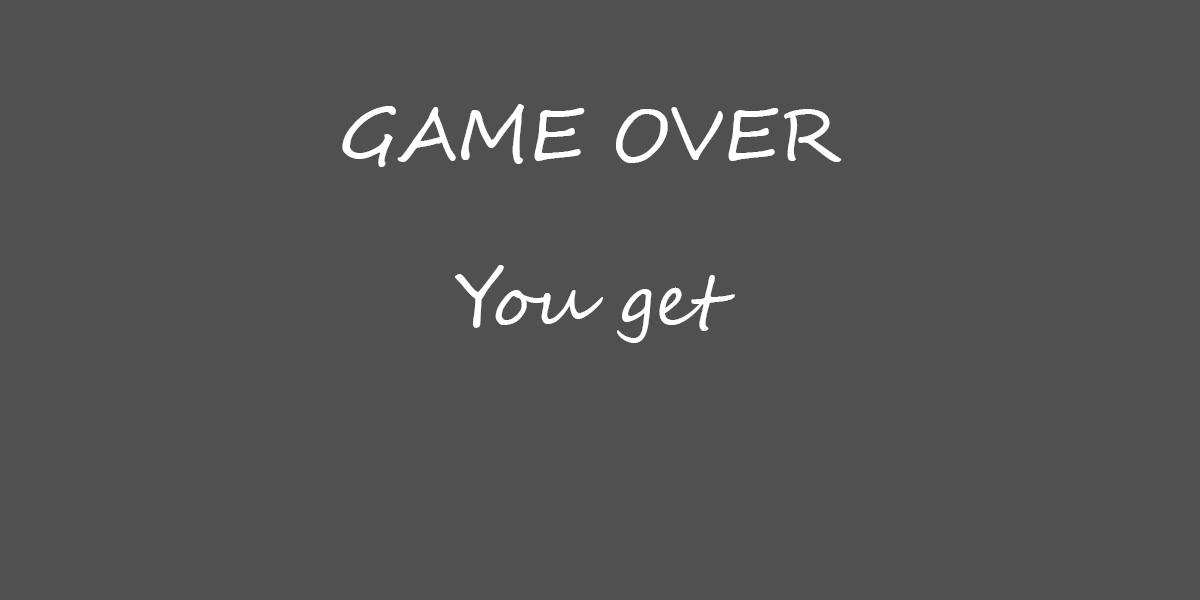
<style>
.page{position:relative;width:1200px;height:600px;background:#505050}
.page>*{position:absolute;margin:0}
.t1{font:72px "SegoeScript";color:#ffffff}
</style>
<div class="page">
<p class="t1" style="left:342px;top:104px;width:500px;height:63px">GAME OVER</p>
<p class="t1" style="left:455px;top:265px;width:280px;height:78px">You get</p>
</div>
